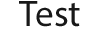
<style>
.page{position:relative;width:100px;height:50px;background:#ffffff}
.page>*{position:absolute;margin:0}
.t1{font:37px "MyriadPro-Regular";color:#181818}
</style>
<div class="page">
<p class="t1" style="left:19px;top:1px;width:61px;height:26px">Test</p>
</div>
